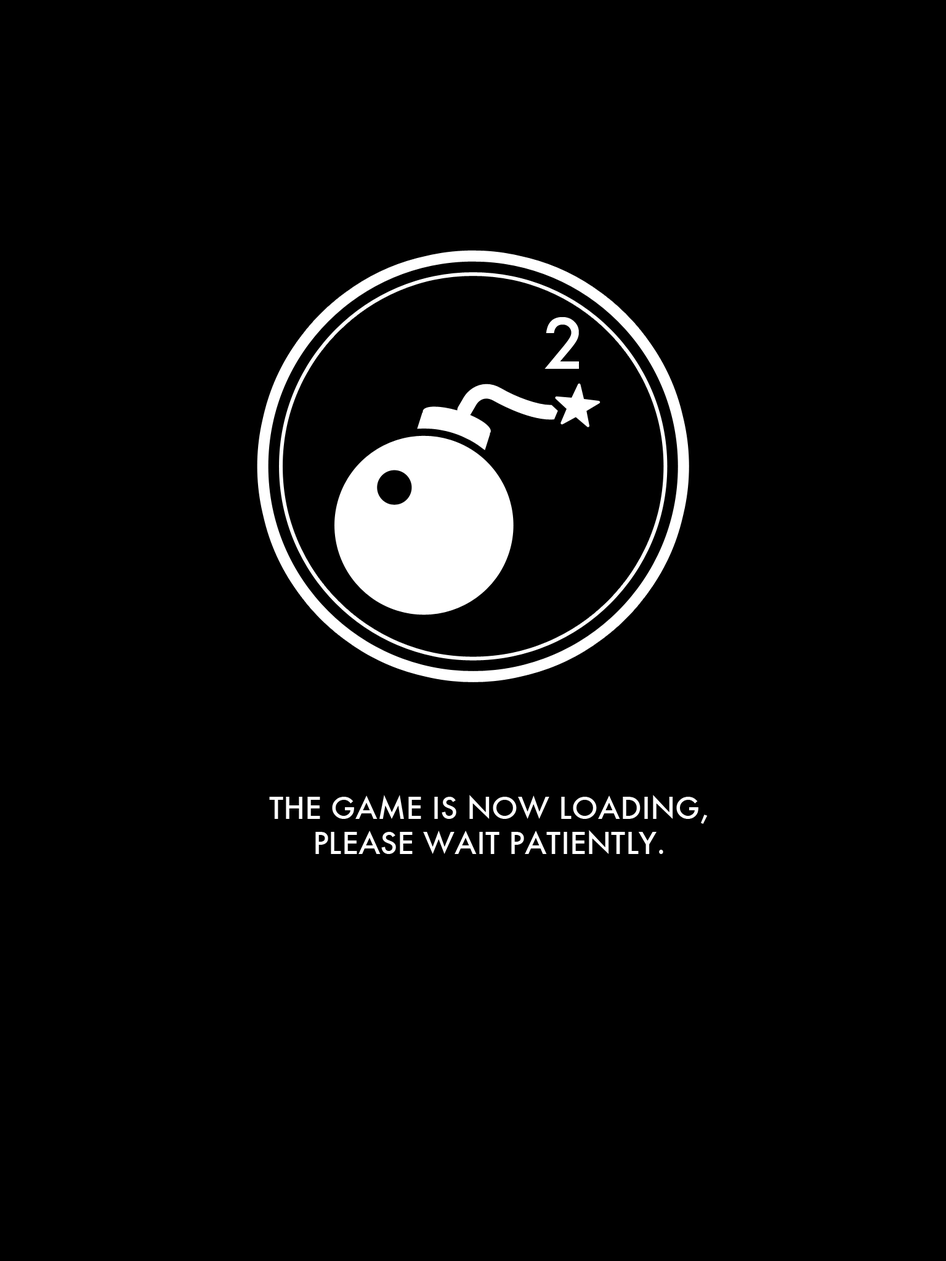
<style>
.page{position:relative;width:946px;height:1261px;background:#000000}
.page>*{position:absolute;margin:0}
.t1{font:67.3px "Futura-Medium";color:#ffffff}
.t2{font:29.6px "Futura-Medium";color:#ffffff;text-transform:uppercase}
</style>
<div class="page">
<p class="t1" style="left:544px;top:317px;width:35px;height:52px">2</p>
<p class="t2" style="left:269px;top:795px;width:438px;height:59px;text-align:center">The game is now loading,<br>please wait patiently.</p>
</div>
